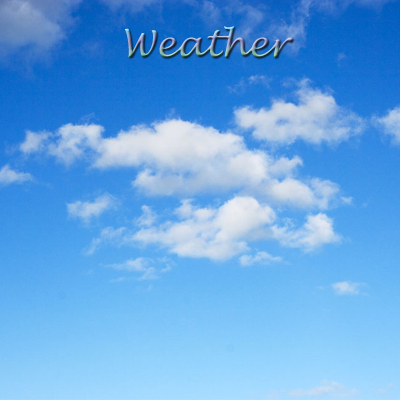
<style>
.page{position:relative;width:400px;height:400px}
.page>*{position:absolute;margin:0}
.t1{font:36px "LucidaHandwriting-Italic"}
</style>
<div class="page">
<p class="t1" style="left:124px;top:26px;width:169px;height:32px">Weather</p>
</div>
